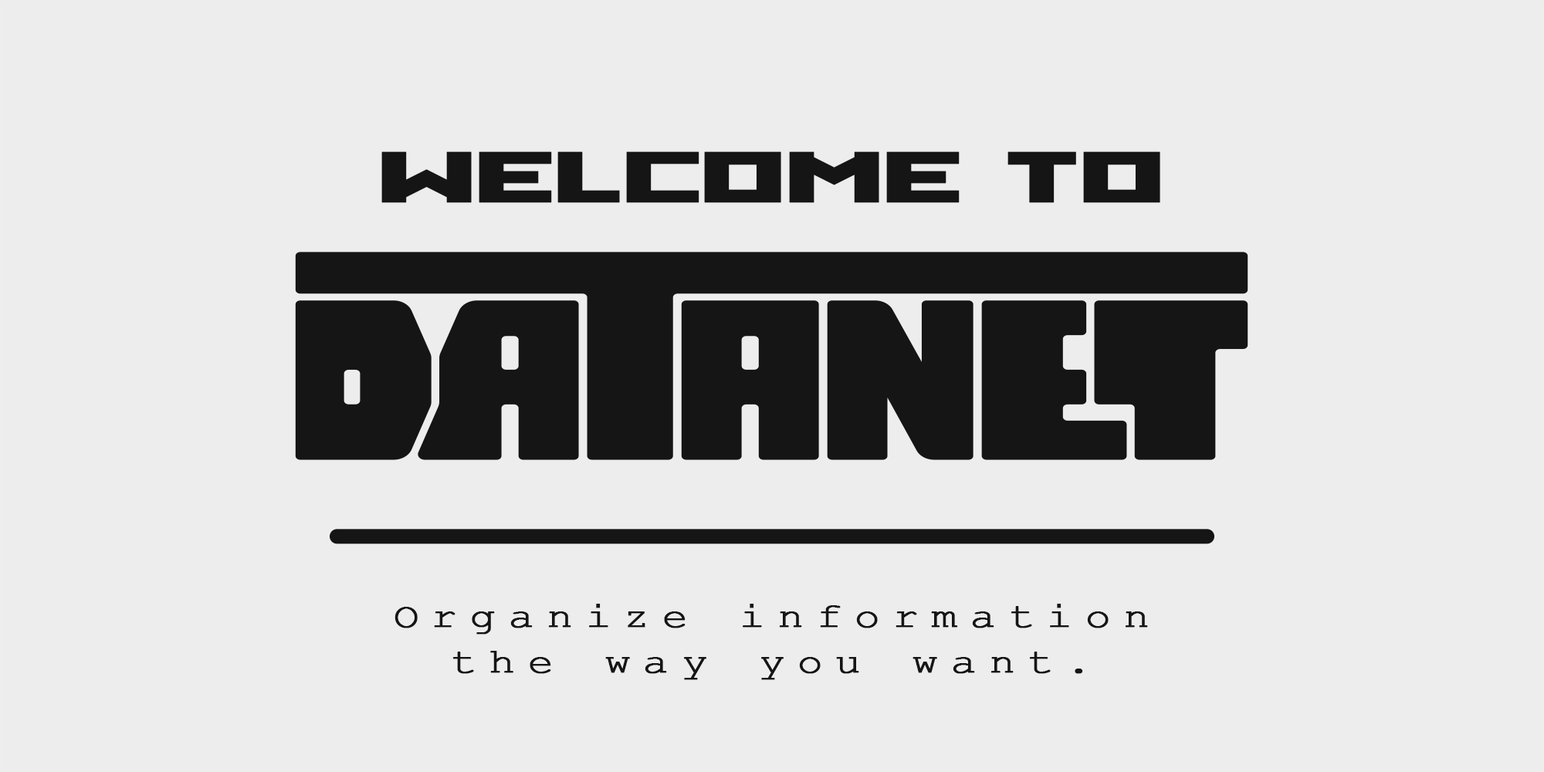
<style>
.page{position:relative;width:1544px;height:772px;background:#ededed}
.page>*{position:absolute;margin:0}
.t1{font:91.1px "SFWADIMGIANT-Heavy";letter-spacing:-0.02em;color:#151515;font-weight:bold;scale:1.99 1}
.t2{font:35.3px/45.2px "CourierNewPSMT";letter-spacing:0.28em;color:#151515;font-weight:bold;scale:1.2 1}
</style>
<div class="page">
<p class="t1" style="left:381px;top:151px;width:780px;height:52px">Welcome to</p>
<p class="t2" style="left:395px;top:604px;width:753px;height:76px;text-align:center">Organize information<br>the way you want.</p>
</div>
